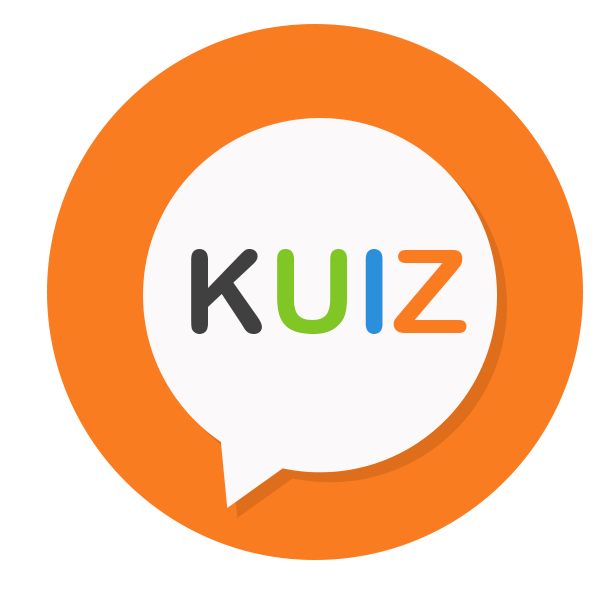
<style>
.page{position:relative;width:600px;height:600px;background:#ffffff}
.page>*{position:absolute;margin:0}
.t1{font:116px "ArialRoundedMTBold";color:#404040}
.t2{font:116px "ArialRoundedMTBold";color:#80c625}
.t3{font:116px "ArialRoundedMTBold";color:#2b8fdc}
.t4{font:116px "ArialRoundedMTBold";color:#f97c20}
</style>
<div class="page">
<p class="t1" style="left:191px;top:249px;width:276px;height:85px">K<span class="t2">U</span><span class="t3">I</span><span class="t4">Z</span></p>
</div>
